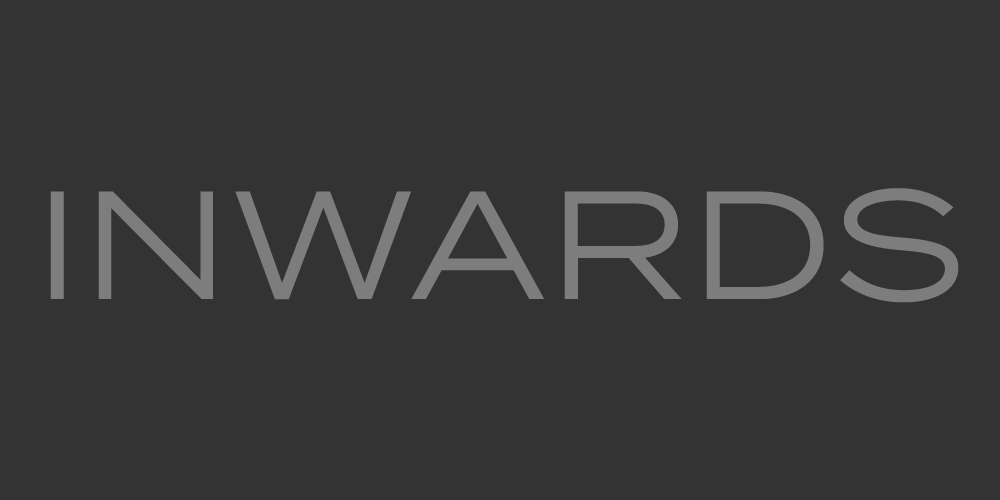
<style>
.page{position:relative;width:1000px;height:500px;background:#333333}
.page>*{position:absolute;margin:0}
.t1{font:153.5px "Termina-Regular";color:#7d7d7d}
</style>
<div class="page">
<p class="t1" style="left:50px;top:188px;width:909px;height:115px">INWARDS</p>
</div>
